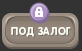
<style>
.page{position:relative;width:82px;height:51px;background:#333333}
.page>*{position:absolute;margin:0}
.t1{font:10px "RotondaC-Bold";letter-spacing:0.06em;color:#fbfdf5;text-transform:uppercase}
</style>
<div class="page">
<p class="t1" style="left:11px;top:27px;width:60px;height:10px">Под залог</p>
</div>
